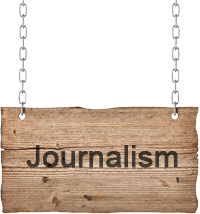
<style>
.page{position:relative;width:200px;height:214px;background:#ffffff}
.page>*{position:absolute;margin:0}
.t1{font:30px "ArialMT";color:#40362d;font-weight:bold}
</style>
<div class="page">
<p class="t1" style="left:26px;top:145px;width:152px;height:23px">Journalism</p>
</div>
